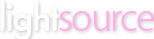
<style>
.page{position:relative;width:154px;height:39px;background:#ffffff}
.page>*{position:absolute;margin:0}
.t1{font:36px "KozGoPro-Light";letter-spacing:-0.05em;color:#ffaee9}
.t2{font:36px "Station-Medium";letter-spacing:-0.05em;color:#ffffff}
</style>
<div class="page">
<p class="t1" style="left:0px;top:1px;width:154px;height:39px"><span class="t2">light</span>source</p>
</div>
